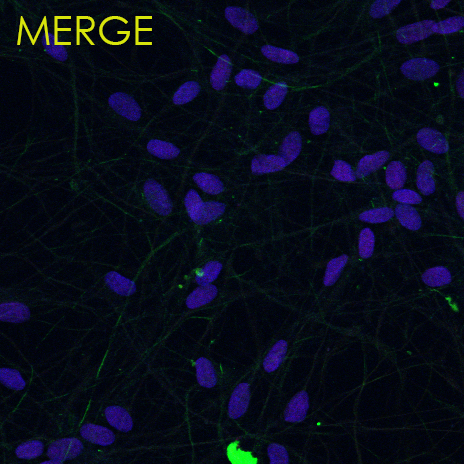
<style>
.page{position:relative;width:464px;height:464px}
.page>*{position:absolute;margin:0}
.t1{font:40px "CenturyGothic";color:#d8e50c}
</style>
<div class="page">
<p class="t1" style="left:17px;top:16px;width:135px;height:29px">MERGE</p>
</div>
